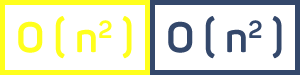
<style>
.page{position:relative;width:300px;height:75px;background:#ffffff}
.page>*{position:absolute;margin:0}
.t1{font:42px "Panton-Bold";color:#ffff1c}
.t2{font:42px "Panton-Bold";color:#34486b}
</style>
<div class="page">
<p class="t1" style="left:18px;top:16px;width:114px;height:43px">O ( n2 )</p>
<p class="t2" style="left:168px;top:16px;width:114px;height:43px">O ( n2 )</p>
</div>
